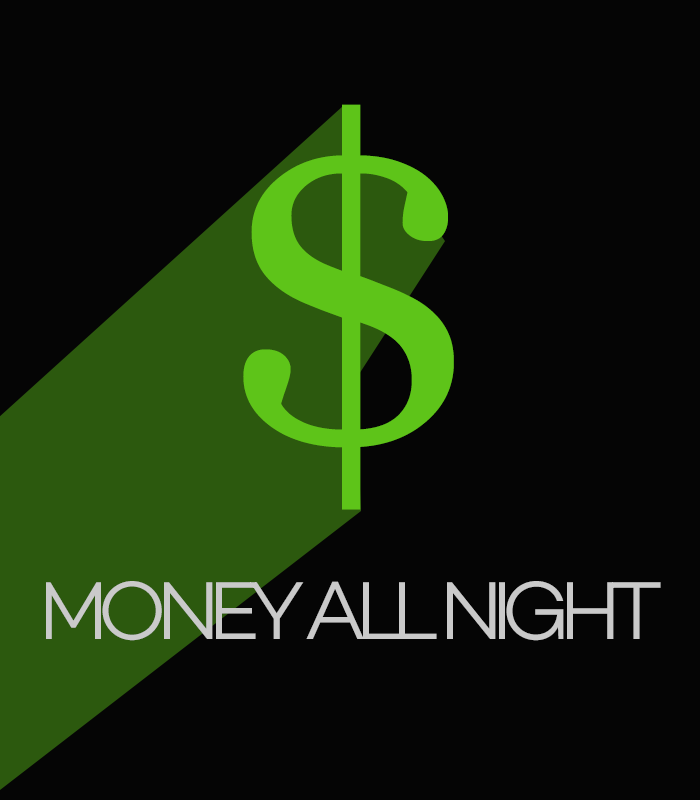
<style>
.page{position:relative;width:700px;height:800px;background:#050505}
.page>*{position:absolute;margin:0}
.t1{font:454.4px "Georgia";letter-spacing:-0.14em;color:#5ec419;text-transform:uppercase}
.t2{font:83.5px "Campton-LightDEMO";letter-spacing:-0.14em;color:#cacaca;text-transform:uppercase}
</style>
<div class="page">
<p class="t1" style="left:243px;top:104px;width:211px;height:406px">$</p>
<p class="t2" style="left:46px;top:581px;width:615px;height:60px">Money All Night</p>
</div>
